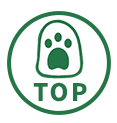
<style>
.page{position:relative;width:117px;height:123px;background:#ffffff}
.page>*{position:absolute;margin:0}
.t1{font:24px "NotoSansKR-Black";letter-spacing:0.1em;color:#247646}
</style>
<div class="page">
<p class="t1" style="left:33px;top:82px;width:54px;height:20px">TOP</p>
</div>
